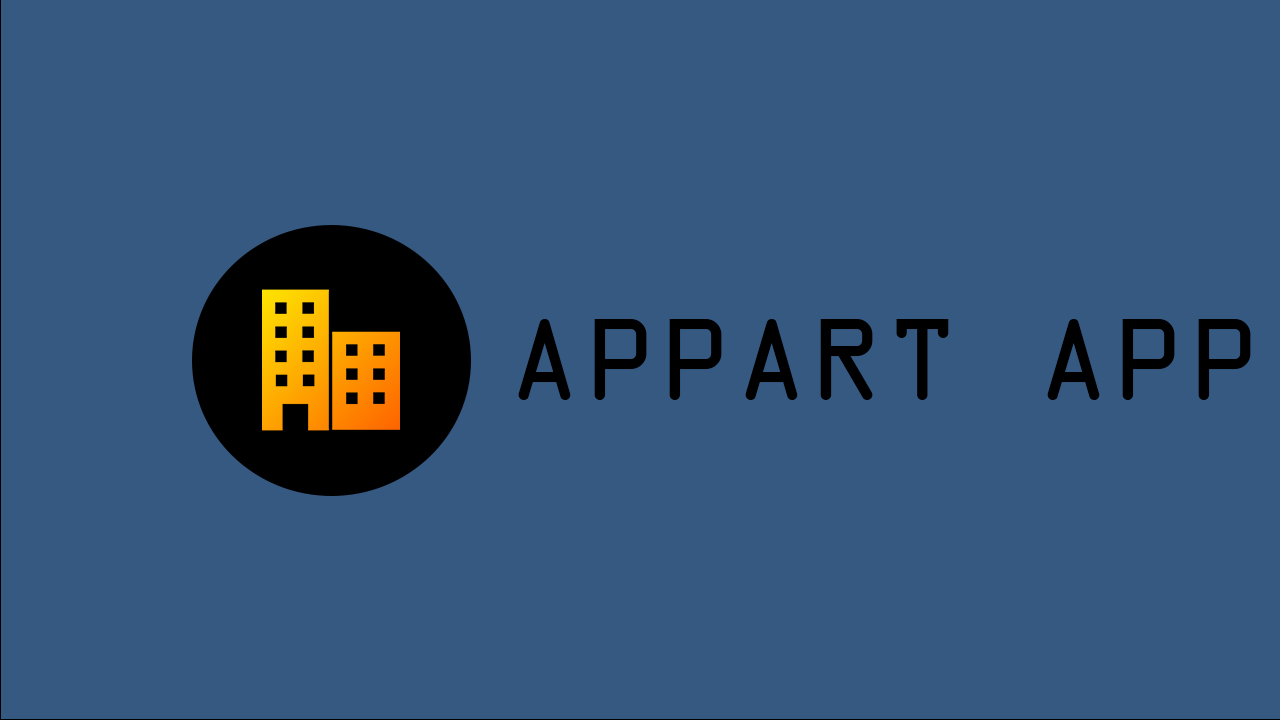
<style>
.page{position:relative;width:1280px;height:720px;background:#365982}
.page>*{position:absolute;margin:0}
.t1{font:125px "OCRAExtended";color:#000000}
</style>
<div class="page">
<p class="t1" style="left:518px;top:319px;width:733px;height:81px">APPART APP</p>
</div>
